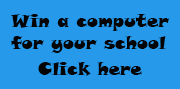
<style>
.page{position:relative;width:180px;height:89px;background:#2699ea}
.page>*{position:absolute;margin:0}
.t1{font:18px "SnapITC-Regular";color:#040404}
</style>
<div class="page">
<p class="t1" style="left:10px;top:14px;width:160px;height:39px">Win a computer<br>for your school</p>
<p class="t1" style="left:38px;top:62px;width:104px;height:14px">Click here</p>
</div>
